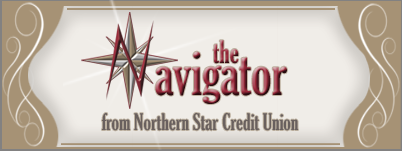
<style>
.page{position:relative;width:402px;height:151px;background:#f0ede8}
.page>*{position:absolute;margin:0}
.t1{font:30px "GloucesterMT-ExtraCondensed"}
.t2{font:60px "GloucesterMT-ExtraCondensed"}
.t3{font:22px "GloucesterMT-ExtraCondensed";color:#69605e}
</style>
<div class="page">
<p class="t1" style="left:213px;top:40px;width:26px;height:24px">the</p>
<p class="t2" style="left:155px;top:51px;width:132px;height:53px">avigator</p>
<p class="t3" style="left:102px;top:113px;width:196px;height:18px">from Northern Star Credit Union</p>
</div>
